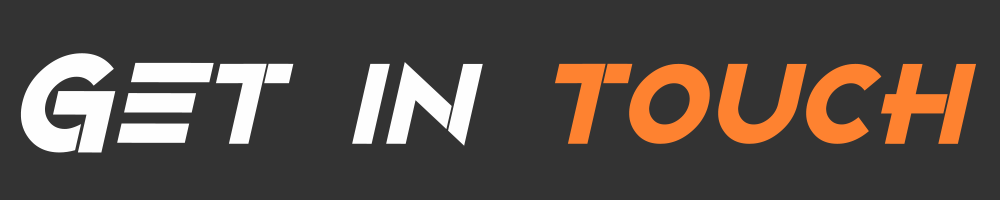
<style>
.page{position:relative;width:1000px;height:200px;background:#333333}
.page>*{position:absolute;margin:0}
.t1{font:141px "Alternity-BoldItalic";color:#fefefe}
.t2{font:141px "Alternity-BoldItalic";color:#fe8230}
</style>
<div class="page">
<p class="t1" style="left:20px;top:53px;width:956px;height:100px">Get in<span class="t2"> touch</span></p>
</div>
